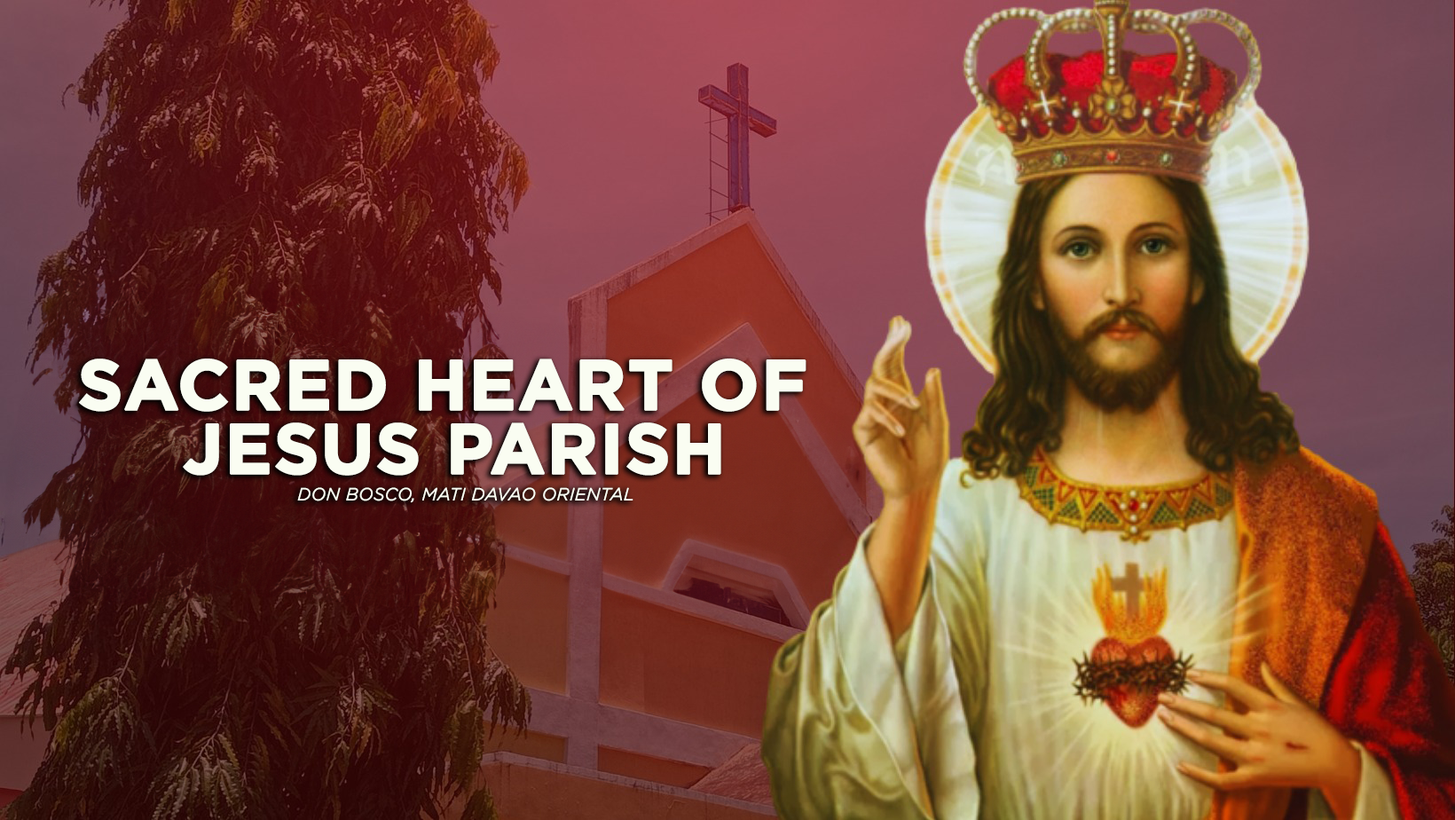
<style>
.page{position:relative;width:1455px;height:820px}
.page>*{position:absolute;margin:0}
.t1{font:70.3px/63.9px "Gotham-Bold";color:#fafdf2;text-transform:uppercase;font-weight:bold}
.t2{font:17.2px "Gotham-LightItalic";color:#fafdf2;text-transform:uppercase;font-weight:bold}
</style>
<div class="page">
<p class="t1" style="left:79px;top:358px;width:727px;height:117px;text-align:center">Sacred heart of <br>jesus parish</p>
<p class="t2" style="left:297px;top:487px;width:336px;height:16px">don bosco, mati davao oriental</p>
</div>
